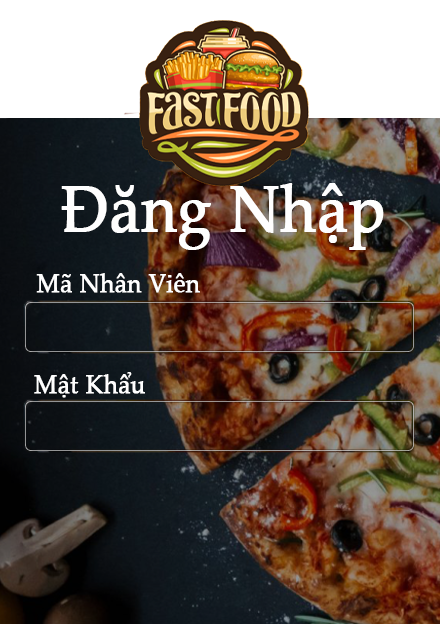
<style>
.page{position:relative;width:440px;height:624px}
.page>*{position:absolute;margin:0}
.t1{font:66px "PalatinoLinotype-Roman";color:#fefefe;font-weight:bold;scale:0.91 1}
.t2{font:26.4px "PalatinoLinotype-Roman";color:#ffffff;font-weight:bold;scale:0.91 1}
</style>
<div class="page">
<p class="t1" style="left:61px;top:183px;width:323px;height:67px">Đăng Nhập</p>
<p class="t2" style="left:36px;top:273px;width:164px;height:20px">Mã Nhân Viên</p>
<p class="t2" style="left:34px;top:372px;width:111px;height:26px">Mật Khẩu</p>
</div>
